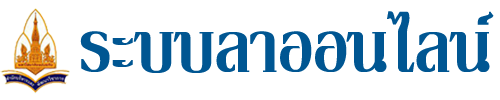
<style>
.page{position:relative;width:500px;height:100px;background:#ffffff}
.page>*{position:absolute;margin:0}
.t1{font:100px "KodchiangUPCBold";color:#005692}
</style>
<div class="page">
<p class="t1" style="left:80px;top:11px;width:414px;height:62px">ระบบลาออนไลน์</p>
</div>
